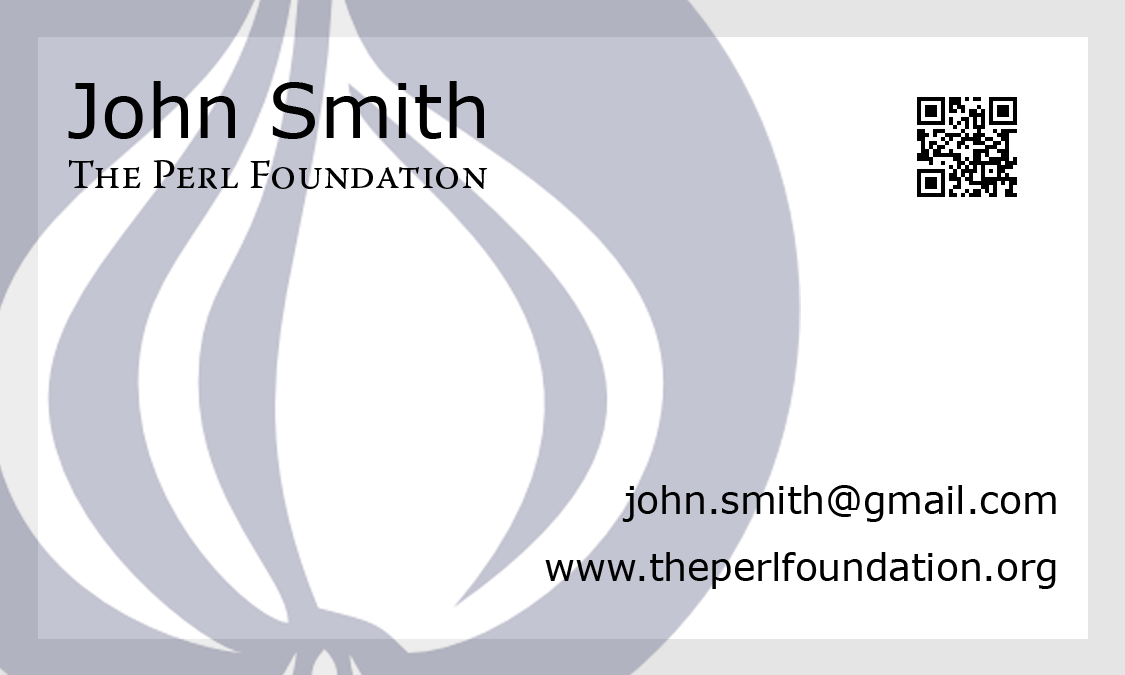
<style>
.page{position:relative;width:1125px;height:675px;background:#ffffff}
.page>*{position:absolute;margin:0}
.t1{font:37.5px/66.7px "Verdana";color:#000000}
.t2{font:75px "Verdana";color:#000000}
.t3{font:41.7px "WarnockPro-Regular";color:#000000;font-variant:small-caps}
</style>
<div class="page">
<p class="t1" style="left:68px;top:81px;width:988px;height:508px"><span class="t2">John Smith<br></span><span class="t3">The Perl Foundation<br><br><br><br><br></span>john.smith@gmail.com<br>www.theperlfoundation.org</p>
</div>
